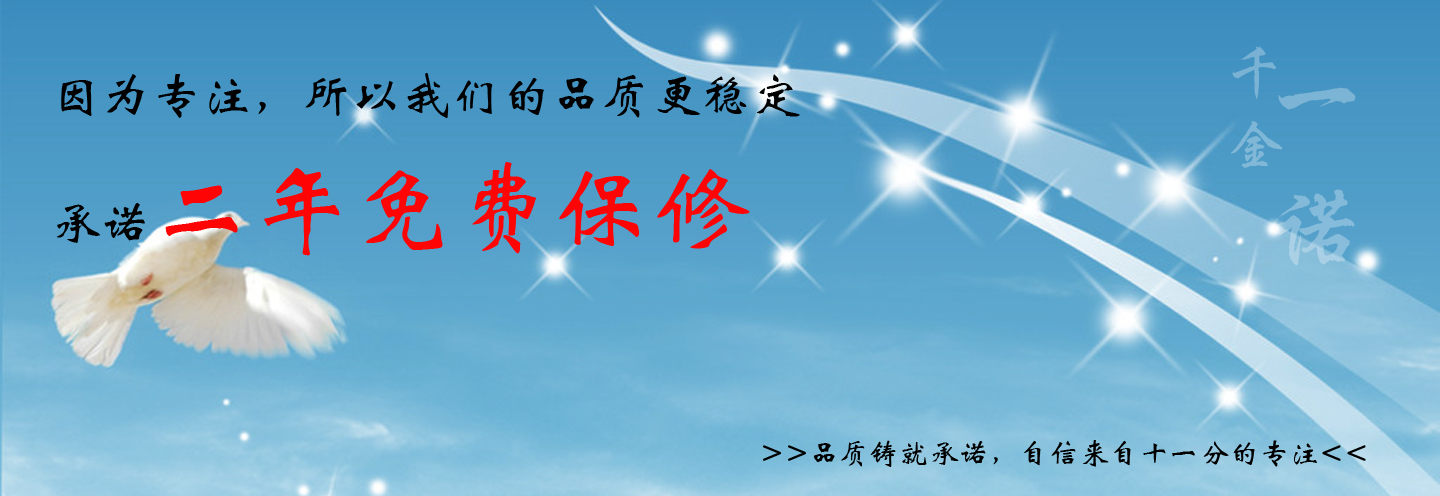
<style>
.page{position:relative;width:1440px;height:496px}
.page>*{position:absolute;margin:0}
.t1{font:56px "FZXKJW--GB1-0";color:#7eb6d7}
.t2{font:50px "STXinwei";color:#000000}
.t3{font:100px "STXinwei";color:#fe0404}
.t4{font:100px "FZXKJW--GB1-0";color:#85bbda}
.t5{font:30px "STXinwei";color:#000000}
</style>
<div class="page">
<p class="t1" style="left:1230px;top:46px;width:53px;height:122px">千 金</p>
<p class="t2" style="left:56px;top:73px;width:744px;height:183px">因为专注，所以我们的品质更稳定<br>承诺<span class="t3">二年免费保修</span></p>
<p class="t4" style="left:1272px;top:87px;width:84px;height:179px">一 诺</p>
<p class="t5" style="left:763px;top:440px;width:603px;height:27px">&gt;&gt;品质铸就承诺，自信来自十一分的专注&lt;&lt;</p>
</div>
